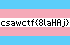
<style>
.page{position:relative;width:70px;height:45px;background:#f5a9b8}
.page>*{position:absolute;margin:0}
.t1{font:8px "Galmuri7-Regular";color:#000000;scale:0.95 1}
</style>
<div class="page">
<p class="t1" style="left:1px;top:19px;width:68px;height:8px">csawctf{8laHAj}</p>
</div>
